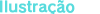
<style>
.page{position:relative;width:100px;height:14px;background:#ffffff}
.page>*{position:absolute;margin:0}
.t1{font:14.8px "RodinProN-DB";color:#59dbdd;font-weight:bold}
</style>
<div class="page">
<p class="t1" style="left:0px;top:0px;width:75px;height:16px">Ilustração</p>
</div>
